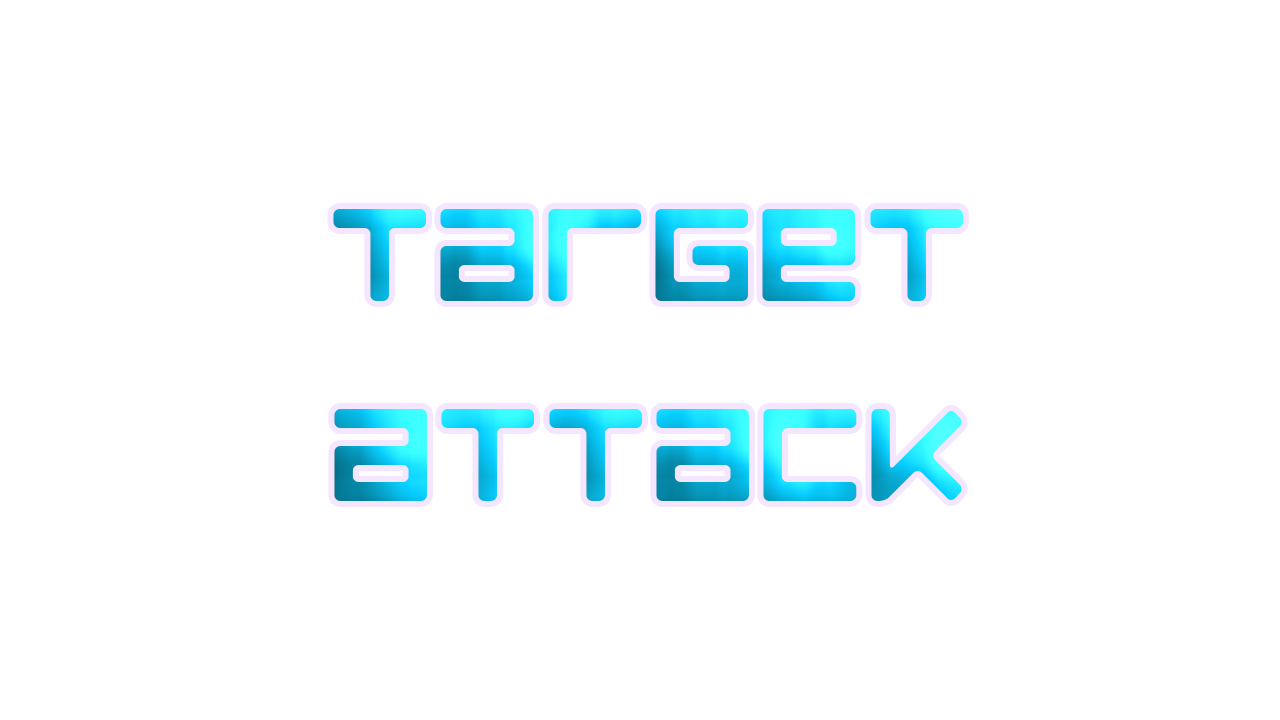
<style>
.page{position:relative;width:1280px;height:720px;background:#ffffff}
.page>*{position:absolute;margin:0}
.t1{font:166.7px "LuggageRoundRegular"}
</style>
<div class="page">
<p class="t1" style="left:333px;top:209px;width:630px;height:292px;text-align:center">target<br>attack</p>
</div>
